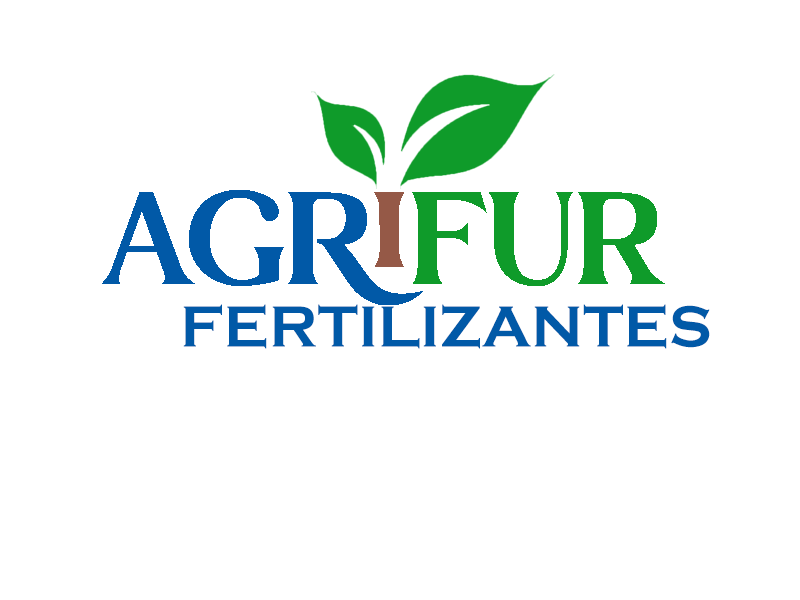
<style>
.page{position:relative;width:800px;height:600px;background:#ffffff}
.page>*{position:absolute;margin:0}
.t1{font:131.1px "YasmenRegular";color:#0159a7}
.t2{font:131.1px "YasmenRegular";color:#0f9b2a}
.t3{font:60px "CopperplateGothic-Bold";color:#0159a7}
</style>
<div class="page">
<p class="t1" style="left:102px;top:190px;width:321px;height:115px">AGRI</p>
<p class="t2" style="left:412px;top:192px;width:253px;height:94px">FUR</p>
<p class="t3" style="left:183px;top:304px;width:527px;height:45px">FERTILIZANTES</p>
</div>
